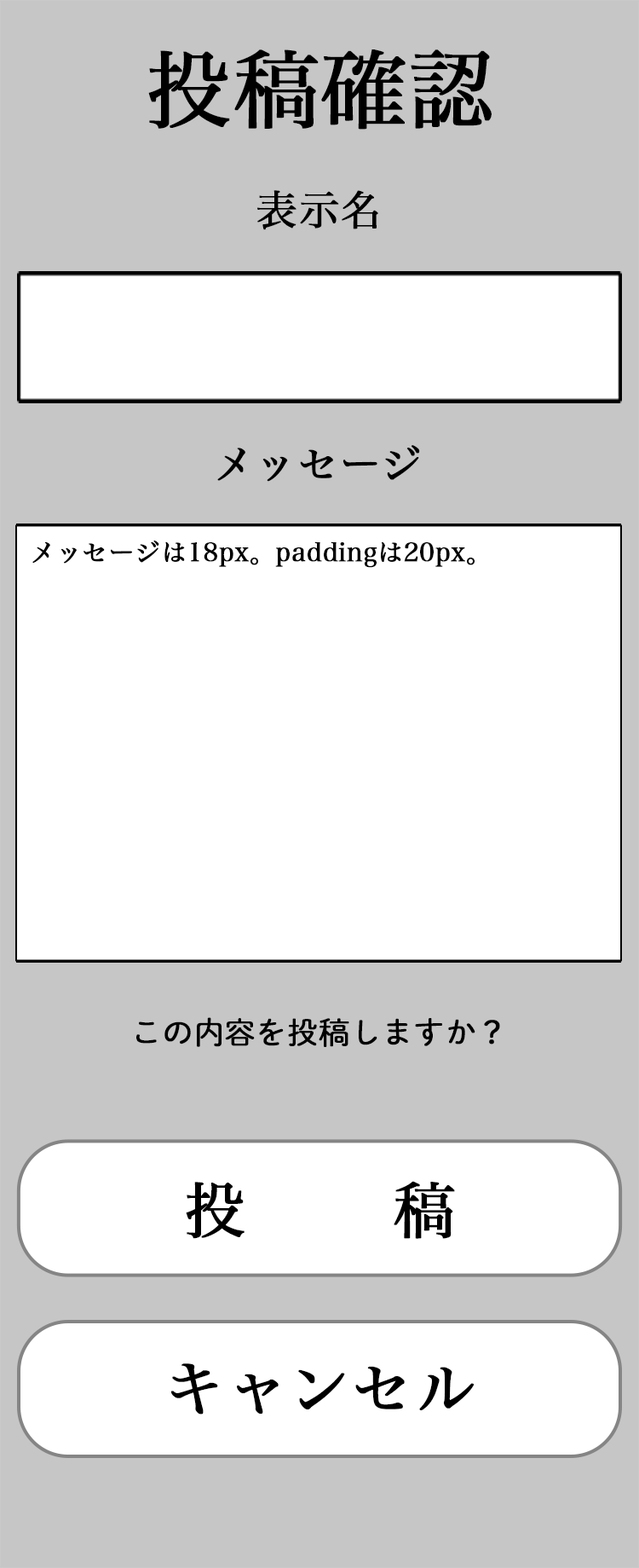
<style>
.page{position:relative;width:639px;height:1568px;background:#ffffff}
.page>*{position:absolute;margin:0}
.t1{font:85.3px "HiraMinPro-W3";color:#000000;font-weight:bold}
.t2{font:40.9px "HiraMinPro-W3";color:#000000;font-weight:bold}
.t3{font:25.6px "HiraMinPro-W3";color:#000000;font-weight:bold}
.t4{font:30.7px "DNPShueiMGoStd-L";color:#000000;font-weight:bold}
.t5{font:61.4px "HiraMinPro-W3";color:#000000;font-weight:bold}
</style>
<div class="page">
<p class="t1" style="left:148px;top:49px;width:344px;height:81px">投稿確認</p>
<p class="t2" style="left:257px;top:190px;width:122px;height:40px">表示名</p>
<p class="t2" style="left:217px;top:445px;width:203px;height:37px">メッセージ</p>
<p class="t3" style="left:32px;top:541px;width:443px;height:27px">メッセージは18px。paddingは20px。</p>
<p class="t4" style="left:136px;top:1017px;width:364px;height:30px">この内容を投稿しますか？</p>
<p class="t5" style="left:186px;top:1181px;width:269px;height:58px">投稿</p>
<p class="t5" style="left:171px;top:1363px;width:304px;height:52px">キャンセル</p>
</div>
